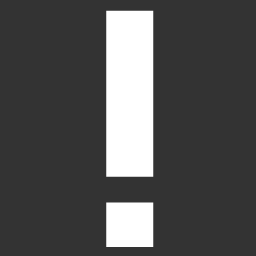
<style>
.page{position:relative;width:256px;height:256px;background:#333333}
.page>*{position:absolute;margin:0}
.t1{font:332.5px "Bahnschrift-Bold";color:#ffffff;font-weight:bold;scale:1.05 1}
</style>
<div class="page">
<p class="t1" style="left:106px;top:10px;width:48px;height:237px">!</p>
</div>
